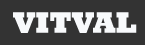
<style>
.page{position:relative;width:145px;height:45px;background:#333333}
.page>*{position:absolute;margin:0}
.t1{font:30px "Rockwell-ExtraBold";color:#f8fafc}
</style>
<div class="page">
<p class="t1" style="left:13px;top:12px;width:124px;height:21px">VITVAL</p>
</div>
